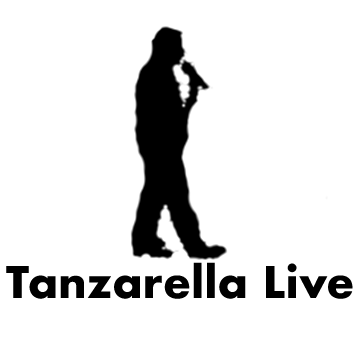
<style>
.page{position:relative;width:358px;height:358px;background:#ffffff}
.page>*{position:absolute;margin:0}
.t1{font:42.6px "Futura-Bold";color:#000000}
</style>
<div class="page">
<p class="t1" style="left:6px;top:262px;width:347px;height:37px">Tanzarella Live</p>
</div>
